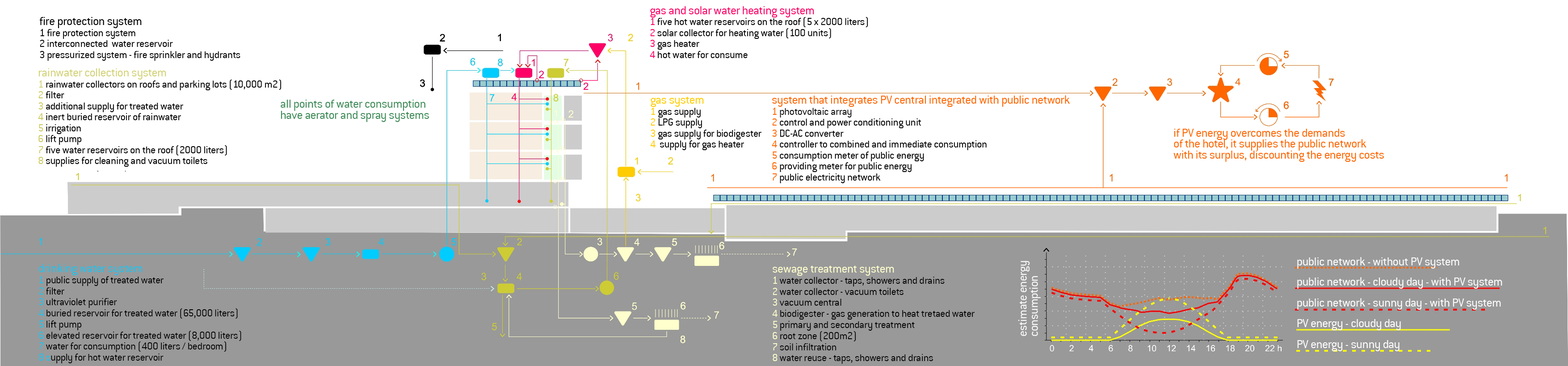
<style>
.page{position:relative;width:1568px;height:366px;background:#ffffff}
.page>*{position:absolute;margin:0}
.t1{font:11.1px/11px "ConduitITC-Light";letter-spacing:-0.005em;color:#000000}
.t2{font:12.8px/11px "ConduitITC-Light";letter-spacing:-0.005em;color:#000000}
.t3{font:12.8px/11px "ConduitITC-Light";letter-spacing:-0.005em;color:#ff0066}
.t4{font:11.1px/11px "ConduitITC-Light";letter-spacing:-0.005em;color:#ff0066}
.t5{font:12.8px/11px "ConduitITC-Light";letter-spacing:-0.005em;color:#d1d176}
.t6{font:11.1px/11px "ConduitITC-Light";letter-spacing:-0.005em;color:#d1d176}
.t7{font:11.1px/11px "ConduitITC-Light";letter-spacing:-0.005em;color:#cac85b}
.t8{font:12.9px/11.1px "ConduitITC-Light";letter-spacing:-0.005em;color:#3d8a56}
.t9{font:12.8px/11px "ConduitITC-Light";letter-spacing:-0.005em;color:#ffcc00}
.t10{font:11.1px/11px "ConduitITC-Light";letter-spacing:-0.005em;color:#ffcc00}
.t11{font:12.8px/11px "ConduitITC-Light";letter-spacing:-0.005em;color:#ff6600}
.t12{font:11.1px/11px "ConduitITC-Light";letter-spacing:-0.005em;color:#ff6600}
.t13{font:11.1px/11px "ConduitITC-Light";letter-spacing:-0.005em;color:#111111}
.t14{font:12.9px/11.1px "ConduitITC-Light";letter-spacing:-0.005em;color:#ff6600}
.t15{font:12.9px "ConduitITC-Light";letter-spacing:-0.005em;color:#ffffff}
.t16{font:12.9px/11px "ConduitITC-Light";letter-spacing:-0.005em;color:#1ec1eb}
.t17{font:11.1px/11px "ConduitITC-Light";letter-spacing:-0.005em;color:#1ec1eb}
.t18{font:11.1px/11.1px "ConduitITC-Light";letter-spacing:-0.005em;color:#000000}
.t19{font:12.9px/11.1px "ConduitITC-Light";letter-spacing:-0.005em;color:#ffffcd}
.t20{font:11.1px/11.1px "ConduitITC-Light";letter-spacing:-0.005em;color:#ffffcd}
.t21{font:12.9px/11.1px "ConduitITC-Light";letter-spacing:-0.005em;color:#ffffff}
</style>
<div class="page">
<p class="t1" style="left:40px;top:17px;width:200px;height:44px;text-align:justify"><span class="t2">fire protection system<br></span>1 fire protection system<br>2 interconnected  water reservoir<br>3 pressurized system - fire sprinkler and hydrants</p>
<p class="t1" style="left:650px;top:6px;width:218px;height:52px;text-align:justify"><span class="t3">gas and solar water heating system<br></span><span class="t4">1 </span>five hot water reservoirs on the roof (5 x 2000 liters)<br><span class="t4">2 </span>solar collector for heating water (100 units)<br><span class="t4">3 </span>gas heater<br><span class="t4">4 </span>hot water for consume</p>
<p class="t1" style="left:38px;top:68px;width:244px;height:99px;text-align:justify"><span class="t5">rainwater collection system<br></span><span class="t6">1 </span>rainwater collectors on roofs and parking lots (10,000 m2)<br><span class="t7">2</span> filter<br><span class="t7">3</span> additional supply for treated water<br><span class="t7">4</span> inert buried reservoir of rainwater<br><span class="t7">5</span> irrigation<br><span class="t7">6</span> lift pump<br><span class="t7">7</span> five water reservoirs on the roof (2000 liters)<br><span class="t7">8</span> supplies for cleaning and vacuum toilets</p>
<p class="t8" style="left:281px;top:100px;width:148px;height:22px;text-align:justify">all points of water consumption <br>have aerator and spray systems</p>
<p class="t1" style="left:650px;top:97px;width:111px;height:53px;text-align:justify"><span class="t9">gas system<br></span><span class="t10">1 </span>gas supply<br><span class="t10">2 </span>LPG supply<br><span class="t10">3 </span>gas supply for biodigester<br><span class="t10">4  </span>supply for gas heater</p>
<p class="t11" style="left:772px;top:95px;width:298px;height:88px;text-align:justify">system that integrates PV central integrated with public network<br><span class="t12">1 </span><span class="t13">photovoltaic array<br></span><span class="t12">2 </span><span class="t1">control and power conditioning unit<br></span><span class="t12">3 </span><span class="t1">DC-AC converter<br></span><span class="t12">4 </span><span class="t1">controller to combined and immediate consumption<br></span><span class="t12">5 </span><span class="t1">consumption meter of public energy<br></span><span class="t12">6 </span><span class="t1">providing meter for public energy<br></span><span class="t12">7 </span><span class="t1">public electricity network</span></p>
<p class="t14" style="left:1173px;top:129px;width:211px;height:33px;text-align:justify">if PV energy overcomes the demands <br>of the hotel, it supplies the public network <br>with its surplus, discounting the energy costs</p>
<p class="t15" style="left:1297px;top:257px;width:162px;height:12px">public network - without PV system</p>
<p class="t1" style="left:38px;top:264px;width:203px;height:99px;text-align:justify"><span class="t16"><br>drinking water system<br></span><span class="t17">1 </span>public supply of treated water<br><span class="t17">2 </span>filter<br><span class="t17">3 </span>ultraviolet purifier<br><span class="t17">4 </span>buried reservoir for treated water (65,000 liters)<br><span class="t17">5 </span>lift pump<br><span class="t17">6 </span>elevated reservoir for treated water (8,000 liters)<br><span class="t17">7 </span>water for consumption (400 liters / bedroom)<br><span class="t17">8 s</span>upply for hot water reservoir</p>
<p class="t18" style="left:772px;top:265px;width:203px;height:99px;text-align:justify"><span class="t19">sewage treatment system<br></span><span class="t20">1 </span>water collector - taps, showers and drains<br><span class="t20">2 </span>water collector - vacuum toilets<br><span class="t20">3 </span>vacuum central<br><span class="t20">4 </span>biodigester - gas generation to heat tretaed water<br><span class="t20">5 </span>primary and secondary treatment<br><span class="t20">6 </span>root zone (200m2)<br><span class="t20">7 </span>soil infiltration<br><span class="t20">8 </span>water reuse - taps, showers and drains</p>
<p class="t21" style="left:1018px;top:261px;width:23px;height:75px;text-align:justify;rotate:-90deg">estimate energy <br>consumption</p>
<p class="t15" style="left:1297px;top:277px;width:205px;height:12px">public network - cloudy day - with PV system</p>
<p class="t15" style="left:1297px;top:298px;width:204px;height:12px">public network - sunny day - with PV system</p>
<p class="t15" style="left:1297px;top:319px;width:104px;height:11px">PV energy - cloudy day</p>
<p class="t15" style="left:1297px;top:340px;width:103px;height:11px">PV energy - sunny day</p>
</div>
